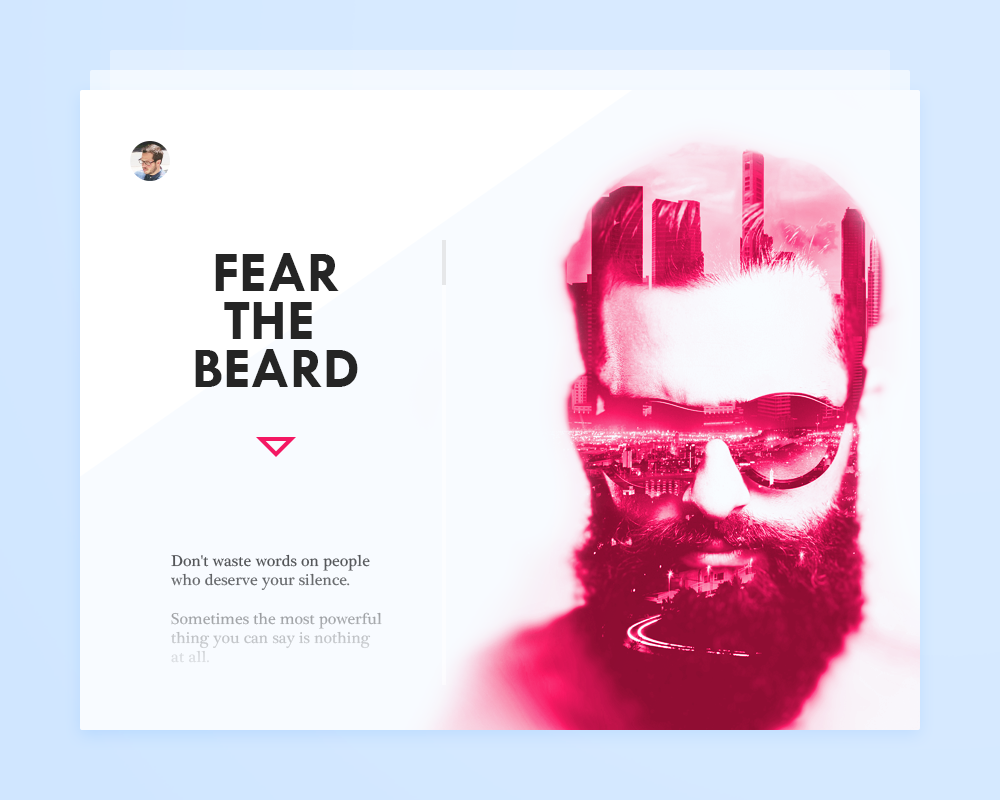
<style>
.page{position:relative;width:1000px;height:800px;background:#f8fbff}
.page>*{position:absolute;margin:0}
.t1{font:57.6px/48px "TwCenMT-Bold";color:#252525;text-transform:uppercase}
.t2{font:16px "PlantagenetCherokee"}
</style>
<div class="page">
<p class="t1" style="left:195px;top:253px;width:163px;height:134px;text-align:center">FEAR<br>the <br>beard</p>
<p class="t2" style="left:171px;top:554px;width:211px;height:109px">Don't waste words on people <br>who deserve your silence. <br><br>Sometimes the most powerful <br>thing you can say is nothing <br>at all.</p>
</div>
